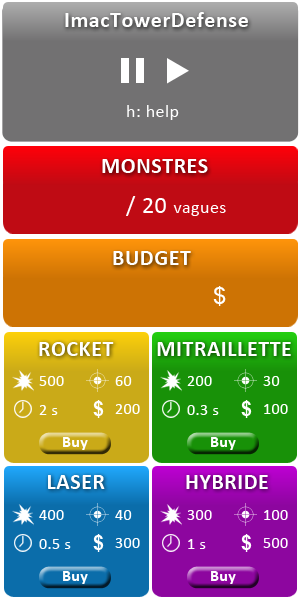
<style>
.page{position:relative;width:300px;height:600px}
.page>*{position:absolute;margin:0}
.t1{font:22px "Calibri-Bold";letter-spacing:0.025em;color:#ffffff}
.t2{font:18px "Calibri";letter-spacing:0.025em;color:#ffffff}
.t3{font:24px "Calibri";letter-spacing:0.025em;color:#ffffff}
.t4{font:24px "ArialMT";letter-spacing:0.025em;color:#ffffff}
.t5{font:16px "Calibri";letter-spacing:0.025em;color:#ffffff}
.t6{font:20px "Arial-BoldMT";letter-spacing:0.025em;color:#ffffff}
.t7{font:16px "Calibri-Bold";letter-spacing:0.025em;color:#ffffff}
</style>
<div class="page">
<p class="t1" style="left:65px;top:12px;width:183px;height:15px">ImacTowerDefense</p>
<p class="t2" style="left:127px;top:105px;width:52px;height:15px">h: help</p>
<p class="t1" style="left:102px;top:159px;width:106px;height:14px">MONSTRES</p>
<p class="t2" style="left:126px;top:196px;width:100px;height:20px"><span class="t3">/ 20 </span>vagues</p>
<p class="t1" style="left:113px;top:251px;width:78px;height:14px">BUDGET</p>
<p class="t4" style="left:213px;top:286px;width:13px;height:20px">$</p>
<p class="t1" style="left:39px;top:342px;width:75px;height:14px">ROCKET</p>
<p class="t1" style="left:157px;top:342px;width:134px;height:14px">MITRAILLETTE</p>
<p class="t5" style="left:39px;top:376px;width:25px;height:10px">500</p>
<p class="t5" style="left:115px;top:376px;width:17px;height:10px">60</p>
<p class="t5" style="left:187px;top:376px;width:25px;height:10px">200</p>
<p class="t5" style="left:263px;top:376px;width:17px;height:10px">30</p>
<p class="t6" style="left:93px;top:400px;width:11px;height:18px">$</p>
<p class="t6" style="left:241px;top:400px;width:11px;height:18px">$</p>
<p class="t5" style="left:39px;top:405px;width:19px;height:10px">2 s</p>
<p class="t5" style="left:115px;top:404px;width:25px;height:10px">200</p>
<p class="t5" style="left:187px;top:405px;width:32px;height:10px">0.3 s</p>
<p class="t5" style="left:264px;top:404px;width:24px;height:10px">100</p>
<p class="t7" style="left:63px;top:437px;width:25px;height:13px">Buy</p>
<p class="t7" style="left:211px;top:437px;width:25px;height:13px">Buy</p>
<p class="t1" style="left:48px;top:475px;width:57px;height:14px">LASER</p>
<p class="t1" style="left:186px;top:475px;width:82px;height:14px">HYBRIDE</p>
<p class="t5" style="left:39px;top:510px;width:25px;height:10px">400</p>
<p class="t5" style="left:115px;top:510px;width:17px;height:10px">40</p>
<p class="t5" style="left:187px;top:510px;width:25px;height:10px">300</p>
<p class="t5" style="left:264px;top:510px;width:24px;height:10px">100</p>
<p class="t6" style="left:93px;top:534px;width:11px;height:18px">$</p>
<p class="t6" style="left:241px;top:534px;width:11px;height:18px">$</p>
<p class="t5" style="left:39px;top:539px;width:32px;height:10px">0.5 s</p>
<p class="t5" style="left:115px;top:538px;width:25px;height:10px">300</p>
<p class="t5" style="left:188px;top:539px;width:18px;height:10px">1 s</p>
<p class="t5" style="left:263px;top:538px;width:25px;height:10px">500</p>
<p class="t7" style="left:63px;top:571px;width:25px;height:13px">Buy</p>
<p class="t7" style="left:211px;top:571px;width:25px;height:13px">Buy</p>
</div>
